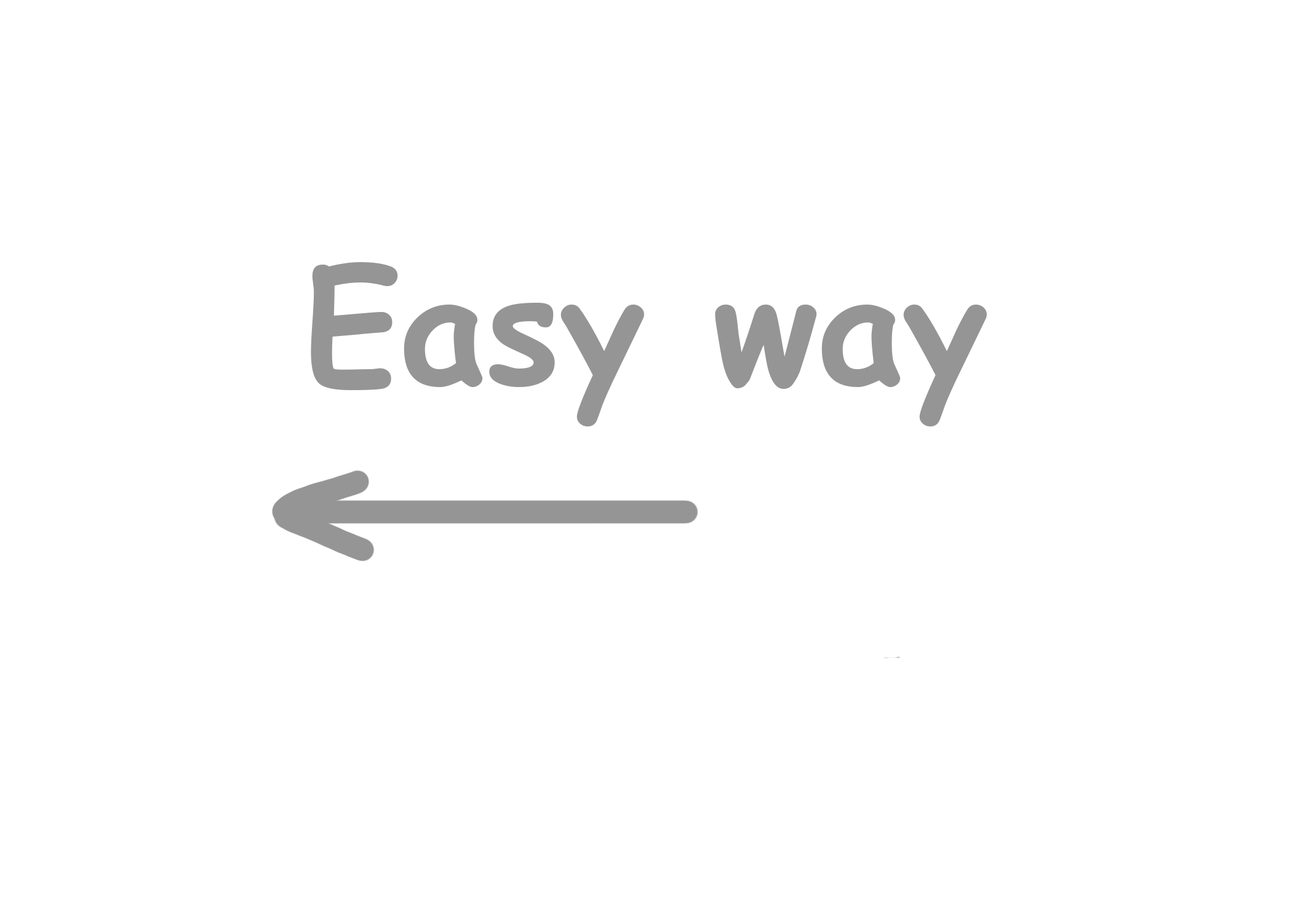
<style>
.page{position:relative;width:1292px;height:923px;background:#ffffff}
.page>*{position:absolute;margin:0}
.t1{font:153.8px "ComicSansMS-Bold";color:#959595}
</style>
<div class="page">
<p class="t1" style="left:311px;top:262px;width:676px;height:164px">Easy way</p>
</div>
